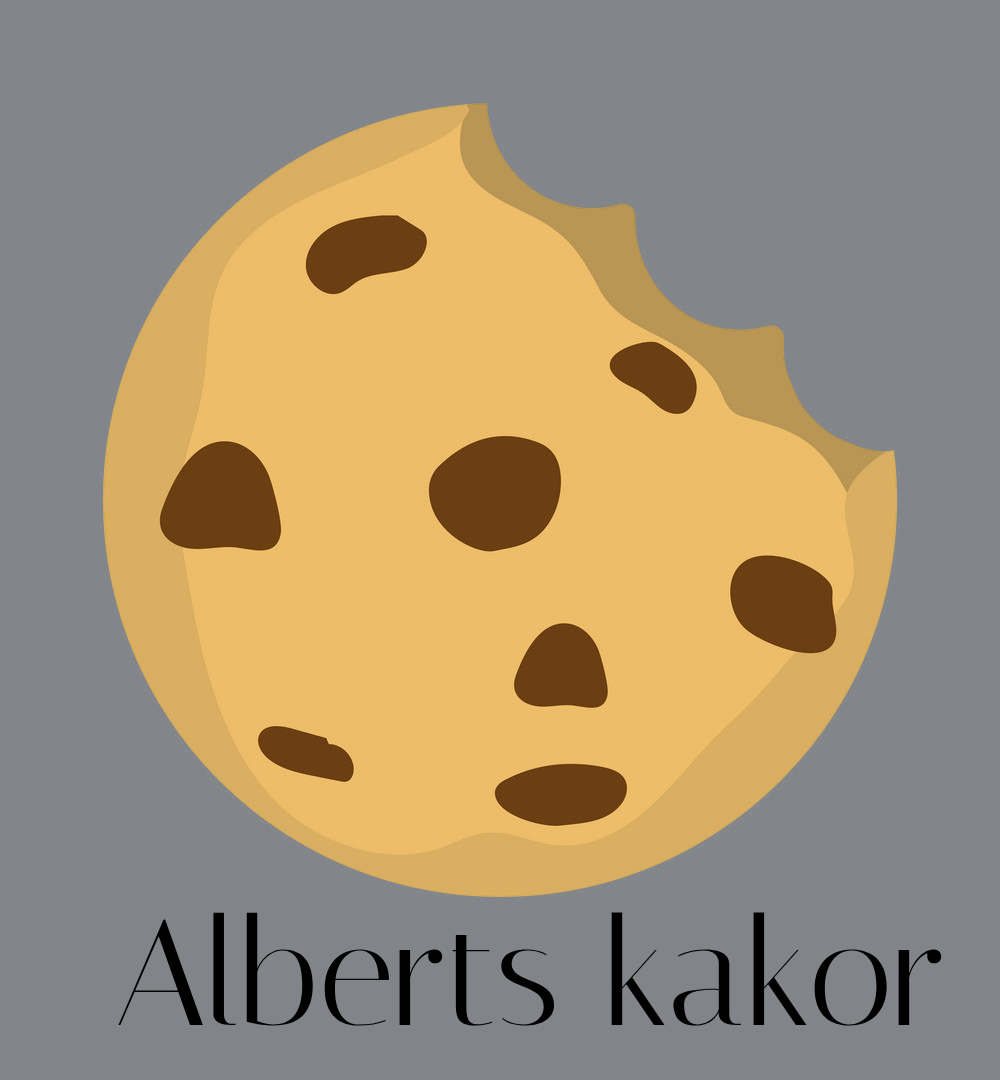
<style>
.page{position:relative;width:1000px;height:1080px;background:#818589}
.page>*{position:absolute;margin:0}
.t1{font:150px "Italiana-Regular";color:#000000}
</style>
<div class="page">
<p class="t1" style="left:118px;top:912px;width:824px;height:114px">Alberts kakor</p>
</div>
